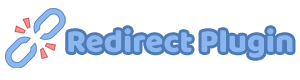
<style>
.page{position:relative;width:300px;height:80px;background:#ffffff}
.page>*{position:absolute;margin:0}
.t1{font:33px "BalooBhaina-Regular";color:#8bb7f0}
</style>
<div class="page">
<p class="t1" style="left:68px;top:28px;width:225px;height:30px">Redirect Plugin</p>
</div>
